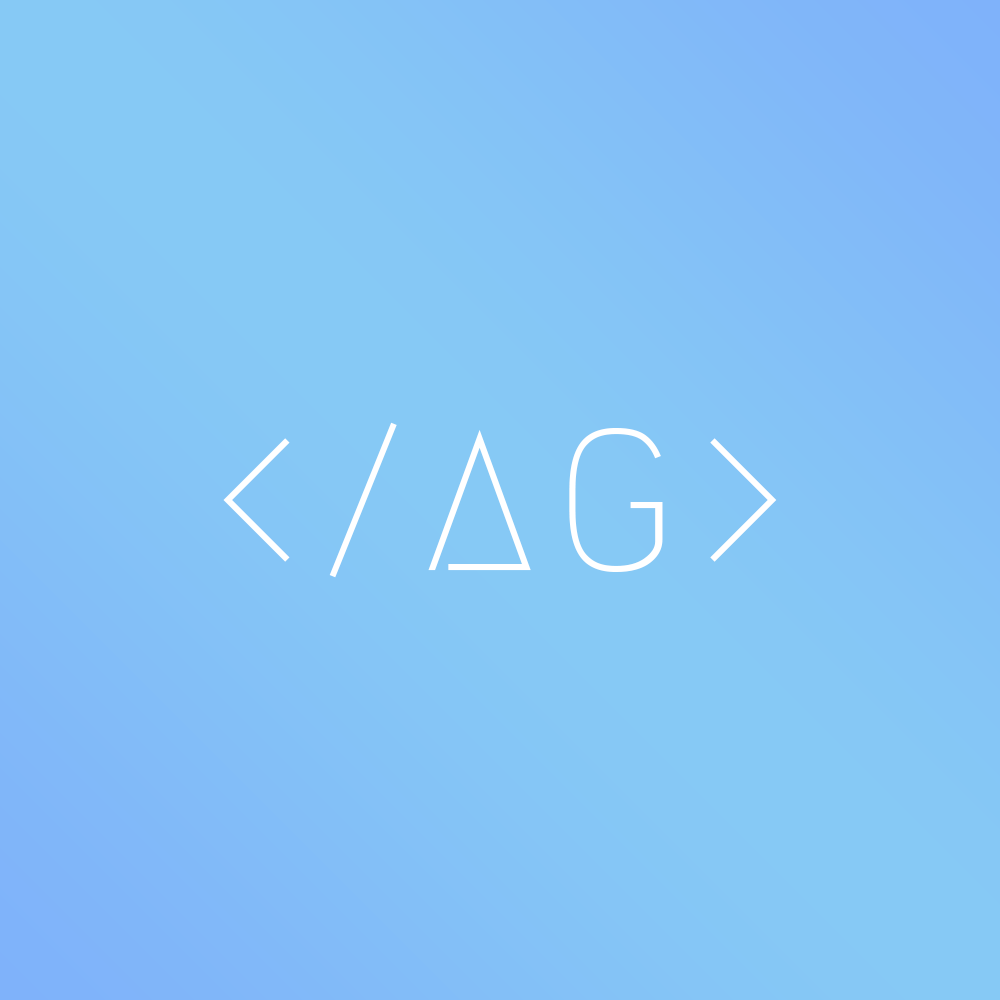
<style>
.page{position:relative;width:1000px;height:1000px}
.page>*{position:absolute;margin:0}
.t1{font:200px "Megrim";letter-spacing:0.1em;color:#ffffff;text-transform:uppercase}
</style>
<div class="page">
<p class="t1" style="left:223px;top:422px;width:554px;height:156px">&lt;/AG&gt;</p>
</div>
